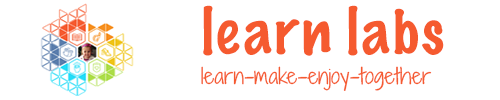
<style>
.page{position:relative;width:500px;height:100px;background:#ffffff}
.page>*{position:absolute;margin:0}
.t1{font:57.9px "MarkerFelt-Thin";color:#f55a2f;scale:1.06 1}
.t2{font:20.7px "ShadowsIntoLight";color:#f55a2f;scale:1.11 1}
</style>
<div class="page">
<p class="t1" style="left:203px;top:5px;width:241px;height:51px">learn labs</p>
<p class="t2" style="left:201px;top:66px;width:231px;height:25px">learn-make-enjoy-together</p>
</div>
